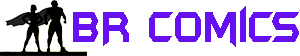
<style>
.page{position:relative;width:300px;height:56px;background:#ffffff}
.page>*{position:absolute;margin:0}
.t1{font:51px "BatmanForeverAlternate";color:#6610f2;scale:0.67 1}
</style>
<div class="page">
<p class="t1" style="left:73px;top:6px;width:226px;height:41px">BR Comics</p>
</div>
